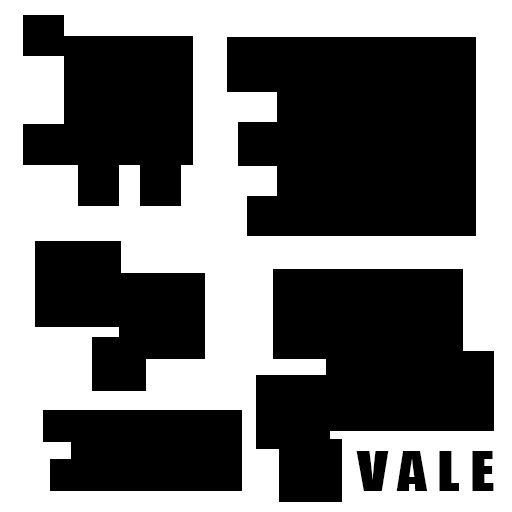
<style>
.page{position:relative;width:512px;height:512px;background:#000000}
.page>*{position:absolute;margin:0}
.t1{font:51.3px "Impact";letter-spacing:0.17em;color:#000000;scale:1.15 1}
</style>
<div class="page">
<p class="t1" style="left:356px;top:451px;width:138px;height:40px">VALE</p>
</div>
